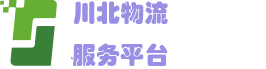
<style>
.page{position:relative;width:266px;height:69px;background:#ffffff}
.page>*{position:absolute;margin:0}
.t1{font:24px "STHupo";color:#9990e6}
</style>
<div class="page">
<p class="t1" style="left:72px;top:1px;width:96px;height:65px">川北物流<br>服务平台</p>
</div>
